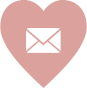
<style>
.page{position:relative;width:87px;height:88px;background:#dba19c}
.page>*{position:absolute;margin:0}
.t1{font:100px "VITRO-CORE-TTF";color:#dba19c}
</style>
<div class="page">
<p class="t1" style="left:0px;top:0px;width:87px;height:88px">♥</p>
</div>
